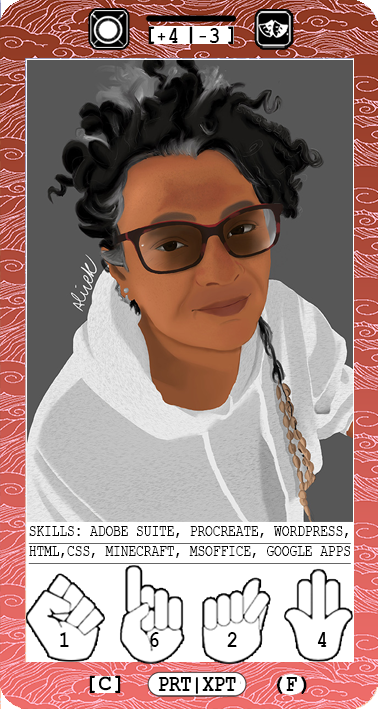
<style>
.page{position:relative;width:378px;height:709px}
.page>*{position:absolute;margin:0}
.t1{font:23.3px "CourierNewPS-BoldMT";letter-spacing:-0.05em;color:#000000;text-transform:uppercase;scale:0.8 1}
.t2{font:16.7px "CourierNewPSMT";letter-spacing:-0.025em;color:#000000;text-transform:uppercase;text-decoration:underline;scale:0.8 1}
.t3{font:23.3px "CourierNewPS-BoldMT";color:#000000;text-transform:uppercase;scale:0.8 1}
</style>
<div class="page">
<p class="t1" style="left:169px;top:28px;width:50px;height:15px">4   3</p>
<p class="t2" style="left:28px;top:526px;width:323px;height:38px">Skills: adobe suite, procreate, wordpress,<br>html,css, minecraft, msoffice, google apps</p>
<p class="t3" style="left:60px;top:632px;width:267px;height:15px">1       6      2       4</p>
<p class="t3" style="left:158px;top:677px;width:78px;height:17px">prt|xpt</p>
<p class="t3" style="left:286px;top:677px;width:11px;height:14px">F</p>
</div>
